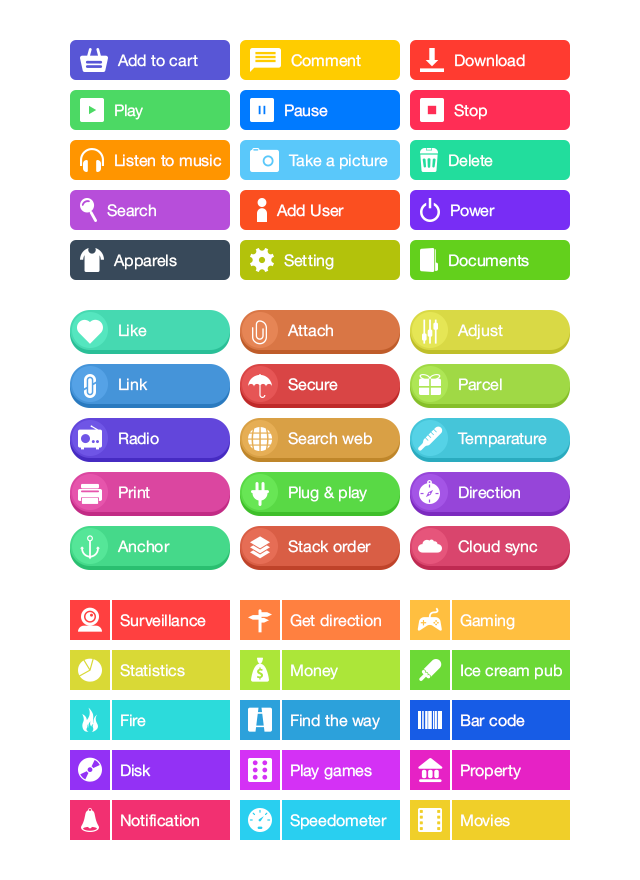
<style>
.page{position:relative;width:640px;height:880px;background:#ffffff}
.page>*{position:absolute;margin:0}
.t1{font:16px "HelveticaNeue";color:#ffffff}
</style>
<div class="page">
<p class="t1" style="left:117px;top:54px;width:81px;height:13px">Add to cart</p>
<p class="t1" style="left:291px;top:54px;width:70px;height:13px">Comment</p>
<p class="t1" style="left:455px;top:54px;width:70px;height:13px">Download</p>
<p class="t1" style="left:115px;top:104px;width:28px;height:16px">Play</p>
<p class="t1" style="left:285px;top:104px;width:43px;height:13px">Pause</p>
<p class="t1" style="left:454px;top:104px;width:33px;height:16px">Stop</p>
<p class="t1" style="left:115px;top:154px;width:107px;height:13px">Listen to music</p>
<p class="t1" style="left:288px;top:154px;width:100px;height:16px">Take a picture</p>
<p class="t1" style="left:449px;top:154px;width:44px;height:13px">Delete</p>
<p class="t1" style="left:107px;top:204px;width:49px;height:13px">Search</p>
<p class="t1" style="left:276px;top:204px;width:68px;height:13px">Add User</p>
<p class="t1" style="left:451px;top:204px;width:44px;height:13px">Power</p>
<p class="t1" style="left:113px;top:254px;width:64px;height:16px">Apparels</p>
<p class="t1" style="left:284px;top:254px;width:50px;height:16px">Setting</p>
<p class="t1" style="left:449px;top:254px;width:80px;height:13px">Documents</p>
<p class="t1" style="left:119px;top:324px;width:28px;height:13px">Like</p>
<p class="t1" style="left:287px;top:324px;width:46px;height:13px">Attach</p>
<p class="t1" style="left:457px;top:324px;width:46px;height:16px">Adjust</p>
<p class="t1" style="left:119px;top:378px;width:29px;height:13px">Link</p>
<p class="t1" style="left:288px;top:378px;width:50px;height:13px">Secure</p>
<p class="t1" style="left:459px;top:378px;width:43px;height:13px">Parcel</p>
<p class="t1" style="left:119px;top:432px;width:40px;height:13px">Radio</p>
<p class="t1" style="left:288px;top:432px;width:84px;height:13px">Search web</p>
<p class="t1" style="left:457px;top:432px;width:90px;height:16px">Temparature</p>
<p class="t1" style="left:119px;top:486px;width:31px;height:13px">Print</p>
<p class="t1" style="left:289px;top:486px;width:78px;height:16px">Plug &amp; play</p>
<p class="t1" style="left:459px;top:486px;width:61px;height:13px">Direction</p>
<p class="t1" style="left:117px;top:540px;width:53px;height:13px">Anchor</p>
<p class="t1" style="left:288px;top:540px;width:83px;height:13px">Stack order</p>
<p class="t1" style="left:458px;top:540px;width:80px;height:16px">Cloud sync</p>
<p class="t1" style="left:120px;top:614px;width:86px;height:13px">Surveillance</p>
<p class="t1" style="left:290px;top:614px;width:91px;height:13px">Get direction</p>
<p class="t1" style="left:460px;top:614px;width:55px;height:16px">Gaming</p>
<p class="t1" style="left:120px;top:664px;width:65px;height:13px">Statistics</p>
<p class="t1" style="left:291px;top:664px;width:47px;height:16px">Money</p>
<p class="t1" style="left:461px;top:664px;width:101px;height:16px">Ice cream pub</p>
<p class="t1" style="left:121px;top:714px;width:25px;height:13px">Fire</p>
<p class="t1" style="left:291px;top:714px;width:89px;height:16px">Find the way</p>
<p class="t1" style="left:461px;top:714px;width:64px;height:13px">Bar code</p>
<p class="t1" style="left:121px;top:764px;width:30px;height:13px">Disk</p>
<p class="t1" style="left:291px;top:764px;width:81px;height:16px">Play games</p>
<p class="t1" style="left:461px;top:764px;width:60px;height:16px">Property</p>
<p class="t1" style="left:121px;top:814px;width:78px;height:13px">Notification</p>
<p class="t1" style="left:290px;top:814px;width:97px;height:16px">Speedometer</p>
<p class="t1" style="left:461px;top:814px;width:49px;height:13px">Movies</p>
</div>
